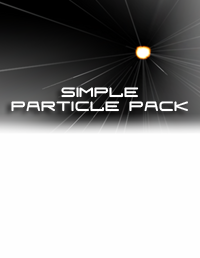
<style>
.page{position:relative;width:200px;height:258px;background:#fefefe}
.page>*{position:absolute;margin:0}
.t1{font:32.6px/13.6px "Fraulein";color:#ffffff}
</style>
<div class="page">
<p class="t1" style="left:11px;top:87px;width:177px;height:25px;text-align:center">Simple<br>Particle Pack</p>
</div>
